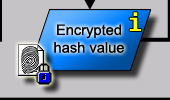
<style>
.page{position:relative;width:170px;height:100px;background:#c6c3c6}
.page>*{position:absolute;margin:0}
.t1{font:24px "Fixedsys";color:#ffff00}
.t2{font:14.7px "ArialMT";color:#000000}
</style>
<div class="page">
<p class="t1" style="left:129px;top:12px;width:12px;height:19px">i</p>
<p class="t2" style="left:54px;top:24px;width:70px;height:29px;text-align:center">Encrypted<br>hash value</p>
</div>
